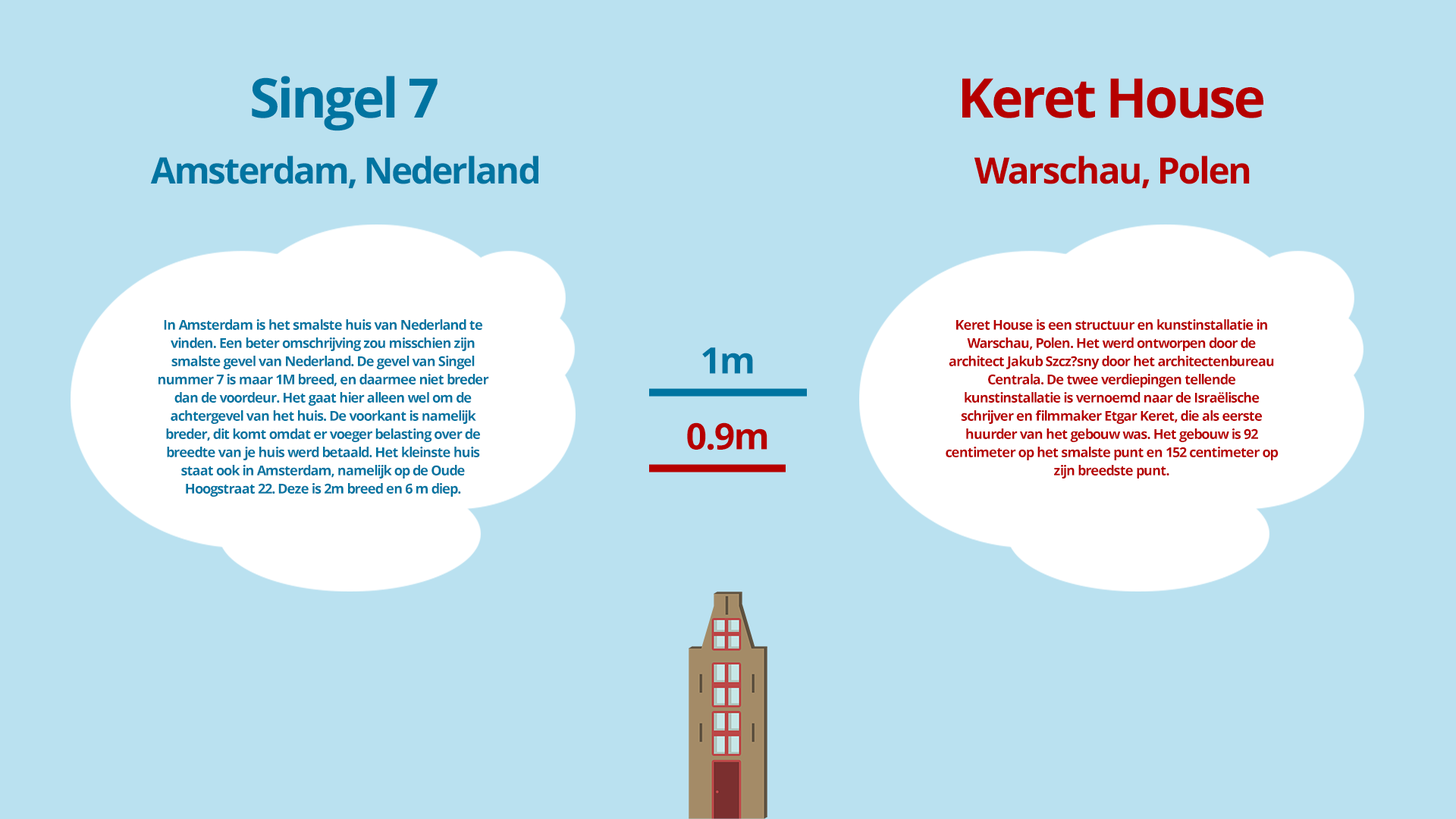
<style>
.page{position:relative;width:1456px;height:819px;background:#bae1f0}
.page>*{position:absolute;margin:0}
.t1{font:54.6px "OpenSans-Bold";letter-spacing:-0.05em;color:#0074a1}
.t2{font:54.6px "OpenSans-Bold";letter-spacing:-0.05em;color:#b60000}
.t3{font:36.4px "OpenSans-Bold";letter-spacing:-0.05em;color:#0074a1}
.t4{font:36.4px "OpenSans-Bold";letter-spacing:-0.05em;color:#b60000}
.t5{font:13.6px/18.2px "OpenSans-Bold";letter-spacing:-0.05em;color:#0074a1}
.t6{font:13.6px/18.2px "OpenSans-Bold";letter-spacing:-0.05em;color:#b60000}
</style>
<div class="page">
<p class="t1" style="left:252px;top:76px;width:186px;height:55px">Singel 7</p>
<p class="t2" style="left:962px;top:78px;width:301px;height:40px">Keret House</p>
<p class="t3" style="left:150px;top:155px;width:388px;height:34px">Amsterdam, Nederland</p>
<p class="t4" style="left:974px;top:155px;width:276px;height:34px">Warschau, Polen</p>
<p class="t5" style="left:158px;top:319px;width:331px;height:178px;text-align:center">In Amsterdam is het smalste huis van Nederland te vinden. Een beter omschrijving zou misschien zijn smalste gevel van Nederland. De gevel van Singel nummer 7 is maar 1M breed, en daarmee niet breder dan de voordeur. Het gaat hier alleen wel om de achtergevel van het huis. De voorkant is namelijk breder, dit komt omdat er voeger belasting over de breedte van je huis werd betaald. Het kleinste huis staat ook in Amsterdam, namelijk op de Oude Hoogstraat 22. Deze is 2m breed en 6 m diep.</p>
<p class="t6" style="left:946px;top:319px;width:333px;height:160px;text-align:center">Keret House is een structuur en kunstinstallatie in Warschau, Polen. Het werd ontworpen door de architect Jakub Szcz?sny door het architectenbureau Centrala. De twee verdiepingen tellende kunstinstallatie is vernoemd naar de Israëlische schrijver en filmmaker Etgar Keret, die als eerste huurder van het gebouw was. Het gebouw is 92 centimeter op het smalste punt en 152 centimeter op zijn breedste punt.</p>
<p class="t3" style="left:702px;top:347px;width:51px;height:27px">1m</p>
<p class="t4" style="left:687px;top:422px;width:80px;height:28px">0.9m</p>
</div>
